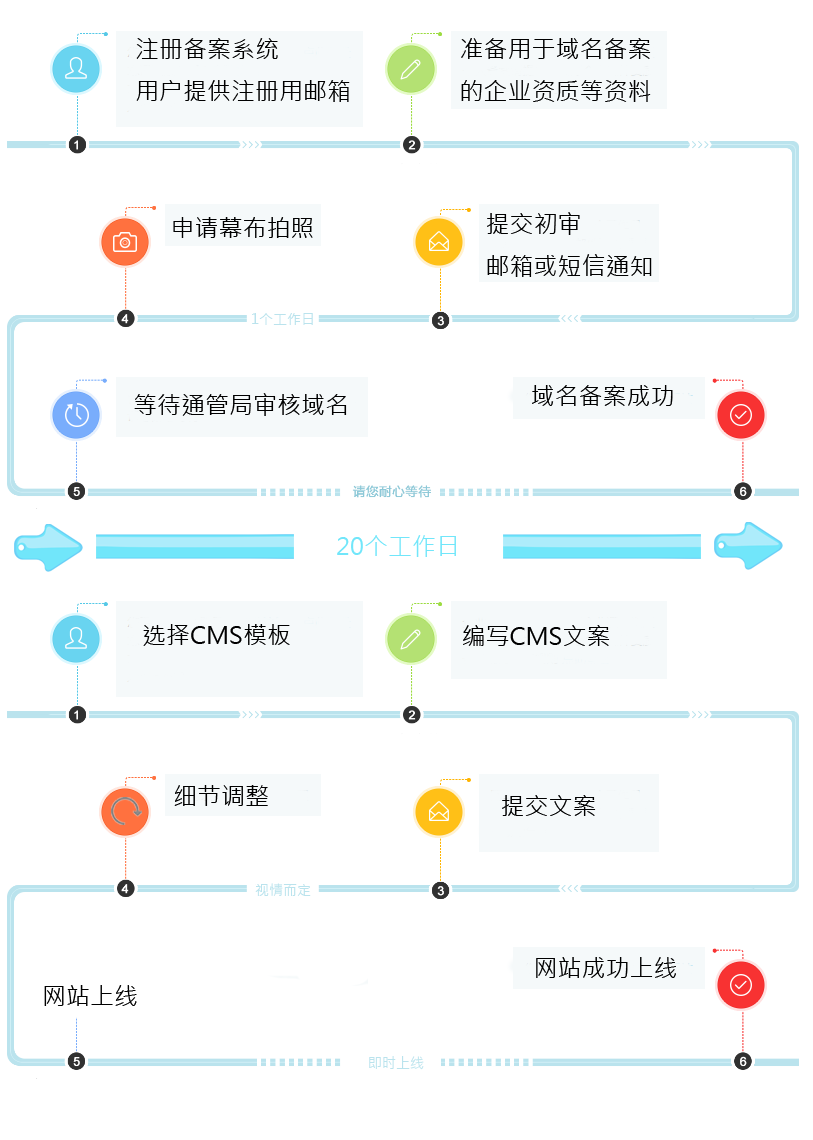
<style>
.page{position:relative;width:813px;height:1140px;background:#ffffff}
.page>*{position:absolute;margin:0}
.t1{font:24px "MicrosoftJhengHeiRegular";color:#000000}
.t2{font:14px "MicrosoftJhengHeiRegular";color:#bae3ed}
.t3{font:24px "MicrosoftJhengHeiRegular";color:#71e6fa}
</style>
<div class="page">
<p class="t1" style="left:136px;top:38px;width:214px;height:64px">注册备案系统<br>用户提供注册用邮箱</p>
<p class="t1" style="left:461px;top:38px;width:190px;height:64px">准备用于域名备案<br>的企业资质等资料</p>
<p class="t1" style="left:173px;top:217px;width:140px;height:21px">申请幕布拍照</p>
<p class="t1" style="left:487px;top:212px;width:165px;height:65px">提交初审<br>邮箱或短信通知</p>
<p class="t2" style="left:252px;top:313px;width:61px;height:12px">1个工作日</p>
<p class="t1" style="left:532px;top:385px;width:141px;height:21px">域名备案成功</p>
<p class="t1" style="left:134px;top:393px;width:213px;height:23px">等待通管局审核域名</p>
<p class="t3" style="left:337px;top:535px;width:119px;height:22px">20个工作日</p>
<p class="t1" style="left:143px;top:624px;width:147px;height:22px">选择CMS模板</p>
<p class="t1" style="left:463px;top:625px;width:147px;height:21px">编写CMS文案</p>
<p class="t1" style="left:174px;top:785px;width:94px;height:21px">细节调整</p>
<p class="t1" style="left:502px;top:795px;width:94px;height:21px">提交文案</p>
<p class="t2" style="left:255px;top:883px;width:56px;height:13px">视情而定</p>
<p class="t1" style="left:536px;top:957px;width:140px;height:21px">网站成功上线</p>
<p class="t1" style="left:44px;top:985px;width:93px;height:21px">网站上线</p>
<p class="t2" style="left:369px;top:1056px;width:55px;height:14px">即时上线</p>
</div>
